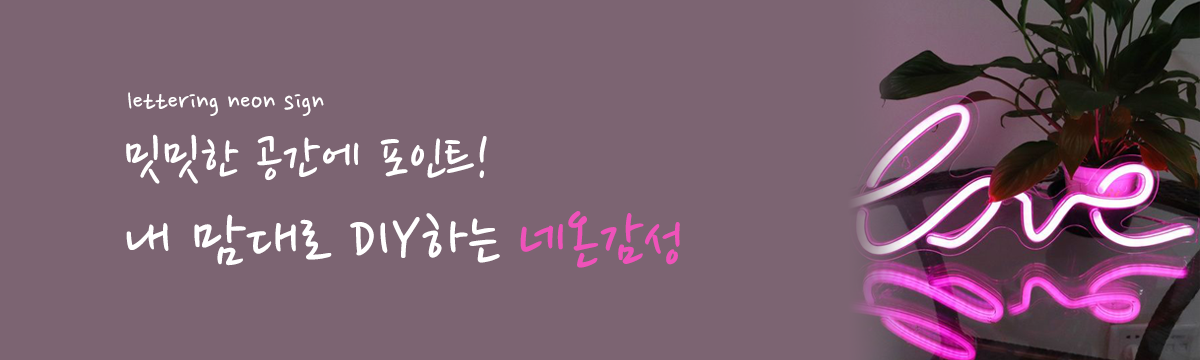
<style>
.page{position:relative;width:1200px;height:360px;background:#7c6472}
.page>*{position:absolute;margin:0}
.t1{font:30px "NanumPen";color:#ffffff}
.t2{font:61.8px "NanumPen";color:#ffffff}
.t3{font:71.4px "NanumPen";color:#ffffff}
.t4{font:71.4px "NanumPen";color:#ef52ba}
</style>
<div class="page">
<p class="t1" style="left:128px;top:92px;width:196px;height:24px">lettering neon sign</p>
<p class="t2" style="left:126px;top:134px;width:554px;height:134px">밋밋한 공간에 포인트!<br><span class="t3">내 맘대로 DIY하는 </span><span class="t4">네온감성</span></p>
</div>
